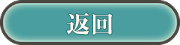
<style>
.page{position:relative;width:180px;height:45px;background:#4a9e9f}
.page>*{position:absolute;margin:0}
.t1{font:24px "RyuminPr6N-ExBold";color:#fff9f3}
</style>
<div class="page">
<p class="t1" style="left:66px;top:13px;width:46px;height:22px">返回</p>
</div>
